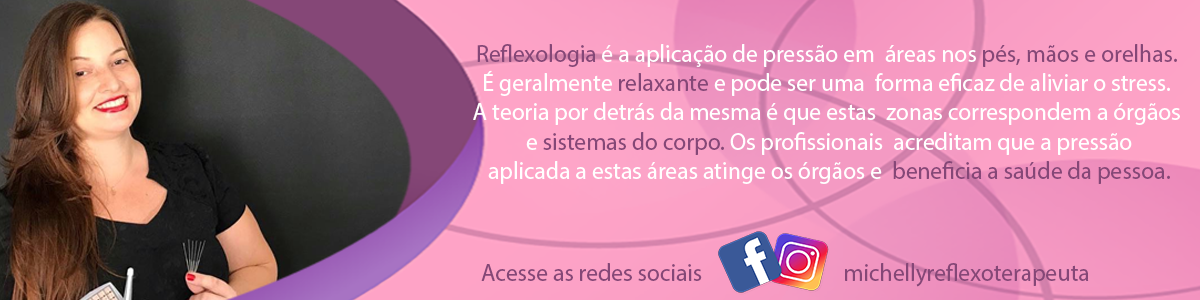
<style>
.page{position:relative;width:1200px;height:300px}
.page>*{position:absolute;margin:0}
.t1{font:24.5px "MyriadPro-Regular";color:#ffffff;scale:0.96 1}
.t2{font:24.5px "MyriadPro-Regular";color:#854777;scale:0.96 1}
</style>
<div class="page">
<p class="t1" style="left:473px;top:44px;width:707px;height:140px;text-align:center"><span class="t2">Reflexologia</span> é a aplicação de pressão em  áreas nos <span class="t2">pés, mãos e orelhas.</span> <br>É geralmente <span class="t2">relaxante</span> e pode ser uma  forma eficaz de aliviar o stress.<br>A teoria por detrás da mesma é que estas  zonas correspondem a órgãos<br> e <span class="t2">sistemas do corpo.</span> Os profissionais  acreditam que a pressão<br> aplicada a estas áreas atinge os órgãos e  <span class="t2">beneficia a saúde da pessoa.</span></p>
<p class="t2" style="left:481px;top:263px;width:221px;height:18px">Acesse as redes sociais</p>
<p class="t2" style="left:845px;top:263px;width:244px;height:24px">michellyreflexoterapeuta</p>
</div>
